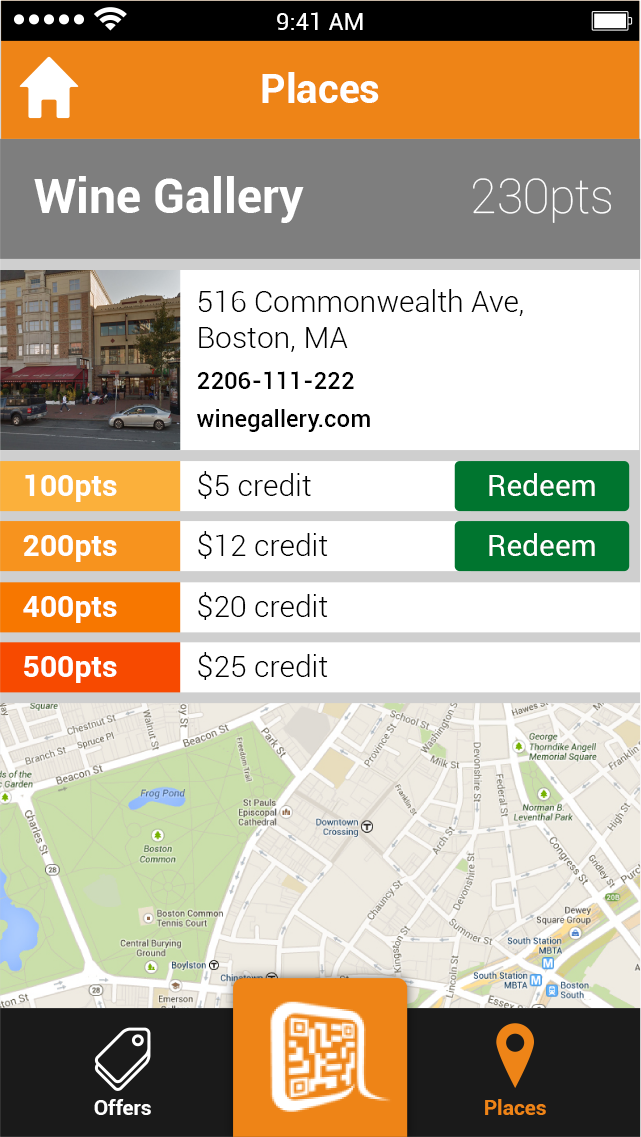
<style>
.page{position:relative;width:641px;height:1137px;background:#ffffff}
.page>*{position:absolute;margin:0}
.t1{font:24px "Roboto-Regular";color:#ffffff}
.t2{font:40px "Roboto-Bold";color:#ffffff}
.t3{font:48px "Roboto-Bold";color:#ffffff}
.t4{font:48px "Roboto-Thin";color:#ffffff}
.t5{font:30px "Roboto-Light";color:#000000}
.t6{font:24px "Roboto-Medium";color:#000000}
.t7{font:30px "Roboto-Regular";color:#ffffff}
.t8{font:30px "Roboto-Bold";color:#ffffff}
.t9{font:21px "Roboto-Bold";color:#ffffff}
.t10{font:21px "Roboto-Bold";color:#ee8417}
</style>
<div class="page">
<p class="t1" style="left:277px;top:12px;width:86px;height:18px">9:41 AM</p>
<p class="t2" style="left:262px;top:72px;width:117px;height:31px">Places</p>
<p class="t3" style="left:34px;top:176px;width:270px;height:47px">Wine Gallery</p>
<p class="t4" style="left:473px;top:178px;width:138px;height:45px">230pts</p>
<p class="t5" style="left:198px;top:289px;width:325px;height:63px">516 Commonwealth Ave,<br>Boston, MA</p>
<p class="t6" style="left:197px;top:371px;width:157px;height:18px">2206-111-222</p>
<p class="t6" style="left:197px;top:409px;width:173px;height:23px">winegallery.com</p>
<p class="t5" style="left:198px;top:471px;width:113px;height:28px">$5 credit</p>
<p class="t7" style="left:489px;top:473px;width:106px;height:23px">Redeem</p>
<p class="t8" style="left:25px;top:474px;width:92px;height:28px">100pts</p>
<p class="t5" style="left:198px;top:531px;width:130px;height:28px">$12 credit</p>
<p class="t7" style="left:489px;top:533px;width:106px;height:23px">Redeem</p>
<p class="t8" style="left:23px;top:535px;width:94px;height:27px">200pts</p>
<p class="t5" style="left:198px;top:592px;width:130px;height:28px">$20 credit</p>
<p class="t8" style="left:23px;top:596px;width:94px;height:27px">400pts</p>
<p class="t5" style="left:198px;top:652px;width:130px;height:28px">$25 credit</p>
<p class="t8" style="left:24px;top:656px;width:93px;height:27px">500pts</p>
<p class="t9" style="left:94px;top:1099px;width:57px;height:16px">Offers</p>
<p class="t10" style="left:485px;top:1099px;width:61px;height:16px">Places</p>
</div>
